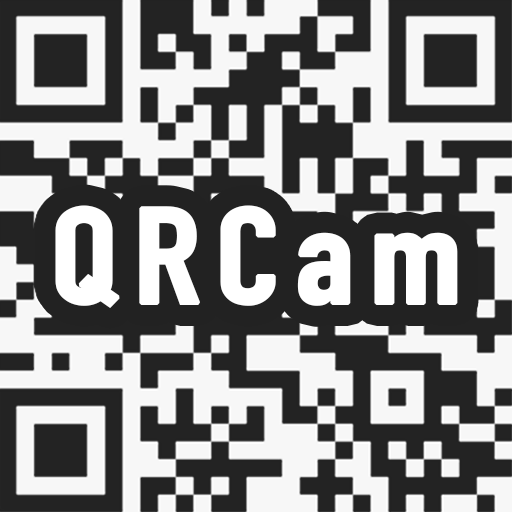
<style>
.page{position:relative;width:512px;height:512px;background:#232323}
.page>*{position:absolute;margin:0}
.t1{font:133px "DINCondensed-Bold";letter-spacing:0.08em;color:#ffffff;font-weight:bold;scale:1.17 1}
</style>
<div class="page">
<p class="t1" style="left:55px;top:205px;width:403px;height:103px">QRCam</p>
</div>
